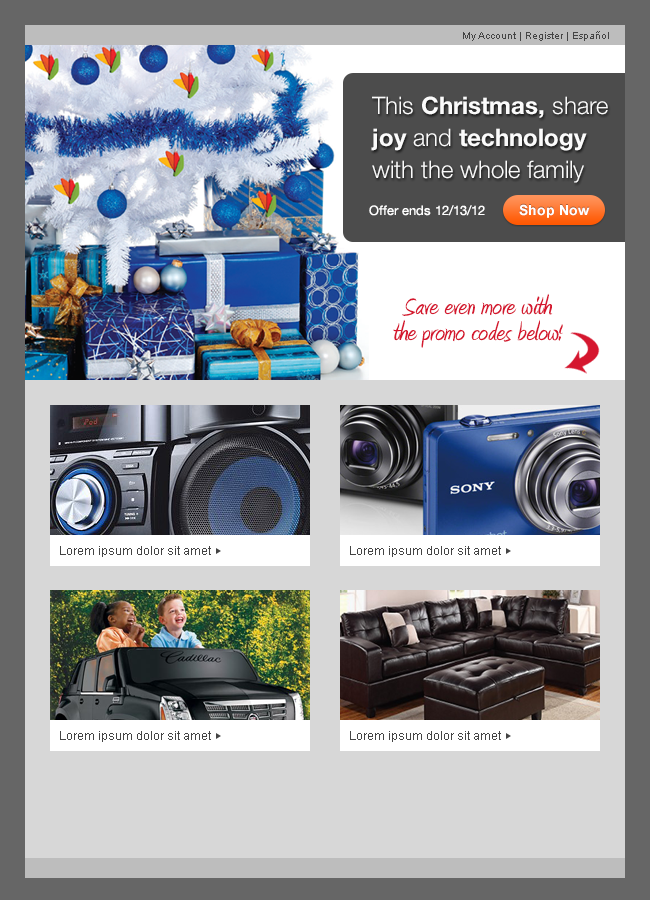
<style>
.page{position:relative;width:650px;height:900px;background:#d7d7d7}
.page>*{position:absolute;margin:0}
.t1{font:10px "ArialMT";color:#444444}
.t2{font:24px/32px "HelveticaNeue-Light";color:#ffffff}
.t3{font:24px/32px "HelveticaNeue-Bold";color:#ffffff}
.t4{font:13px "HelveticaNeue-Roman";color:#ffffff}
.t5{font:30px/26px "Amienne";color:#d5172f}
.t6{font:30px/30px "Amienne";color:#d5172f}
.t7{font:12px "ArialMT";color:#444444}
</style>
<div class="page">
<p class="t1" style="left:463px;top:31px;width:146px;height:10px">My Account | Register | Español</p>
<p class="t2" style="left:371px;top:96px;width:237px;height:87px;opacity:0.97">This <span class="t3">Christmas, </span>share <span class="t3">joy</span> and <span class="t3">technology</span> with the whole family</p>
<p class="t4" style="left:369px;top:205px;width:116px;height:11px">Offer ends 12/13/12</p>
<p class="t5" style="left:393px;top:293px;width:170px;height:55px;text-align:center"><span class="t6">Save even more with <br></span>the promo codes below!</p>
<p class="t7" style="left:60px;top:546px;width:151px;height:11px">Lorem ipsum dolor sit amet</p>
<p class="t7" style="left:350px;top:546px;width:151px;height:11px">Lorem ipsum dolor sit amet</p>
<p class="t7" style="left:60px;top:731px;width:151px;height:11px">Lorem ipsum dolor sit amet</p>
<p class="t7" style="left:350px;top:731px;width:151px;height:11px">Lorem ipsum dolor sit amet</p>
</div>
